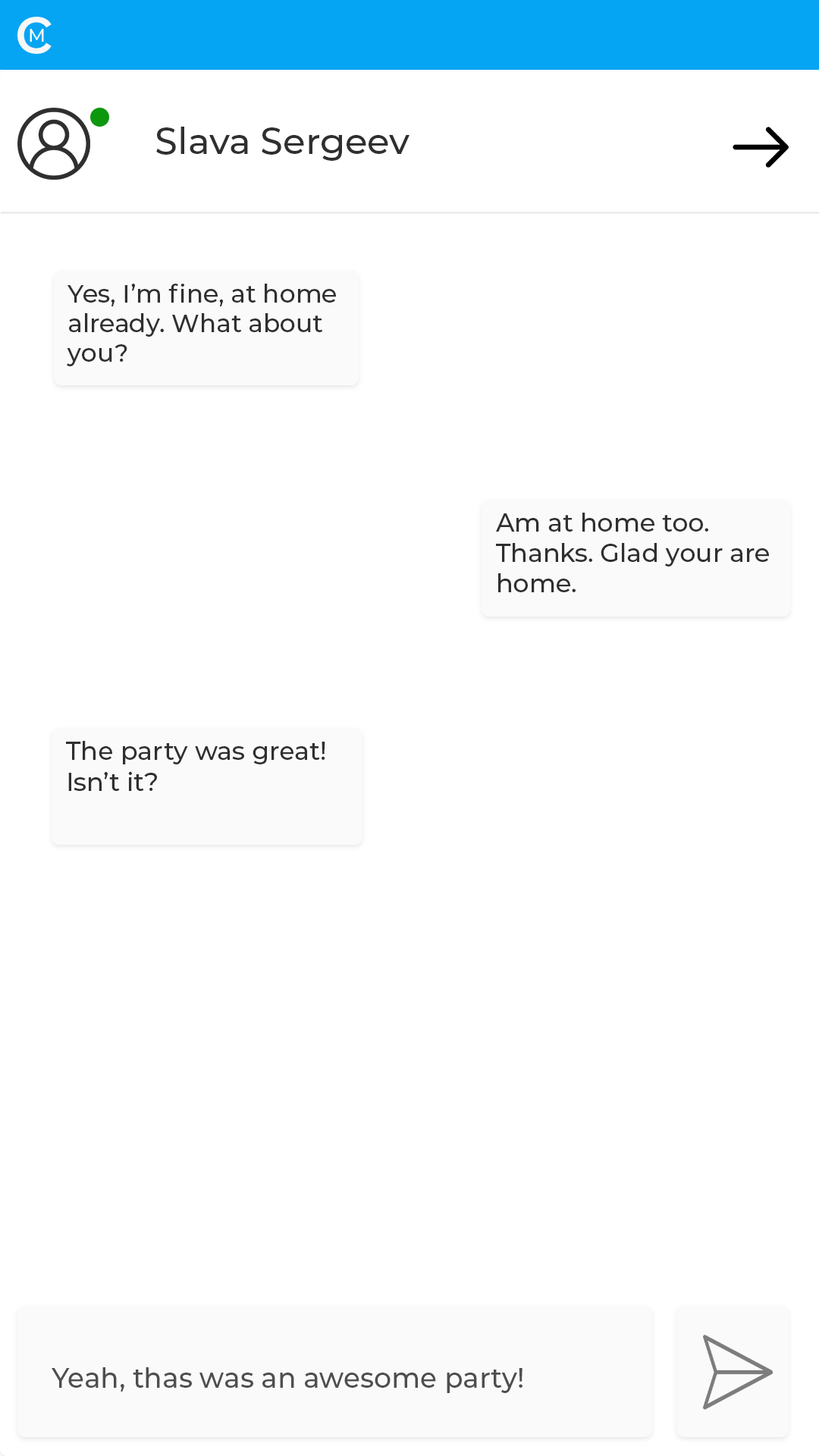
<style>
.page{position:relative;width:819px;height:1456px;background:#ffffff}
.page>*{position:absolute;margin:0}
.t1{font:36.4px "Montserrat-Medium";color:#2f2f2f}
.t2{font:24.8px "Montserrat-Medium";color:#2f2f2f}
.t3{font:25.2px "Montserrat-Medium";color:#2f2f2f}
.t4{font:25.3px "Montserrat-Medium";color:#2f2f2f}
.t5{font:27.3px "Montserrat-Medium";color:#4e4e4e}
</style>
<div class="page">
<p class="t1" style="left:156px;top:127px;width:253px;height:34px">Slava Sergeev</p>
<p class="t2" style="left:67px;top:284px;width:269px;height:82px">Yes, I’m fine, at home<br>already. What about<br>you?</p>
<p class="t3" style="left:496px;top:513px;width:273px;height:79px">Am at home too. <br>Thanks. Glad your are<br>home.</p>
<p class="t4" style="left:66px;top:741px;width:259px;height:50px">The party was great!<br>Isn’t it?</p>
<p class="t5" style="left:52px;top:1367px;width:470px;height:26px">Yeah, thas was an awesome party!</p>
</div>
